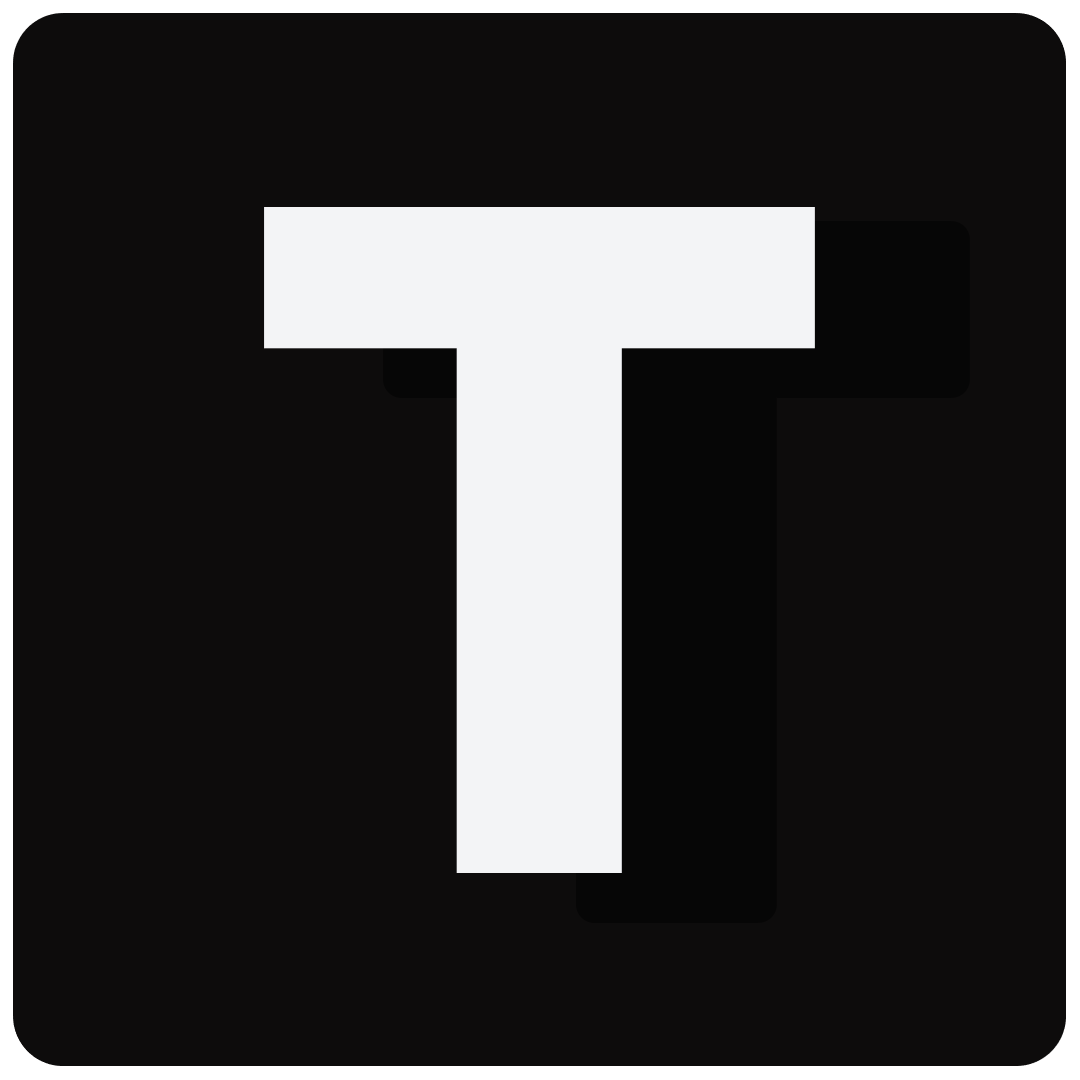
<style>
.page{position:relative;width:1080px;height:1080px;background:#0d0c0c}
.page>*{position:absolute;margin:0}
.t1{font:900px "EncodeSansSemiCondensed-ExtraBold";color:#f3f4f6}
</style>
<div class="page">
<p class="t1" style="left:264px;top:207px;width:551px;height:666px">T</p>
</div>
